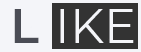
<style>
.page{position:relative;width:141px;height:52px;background:#f4f5f9}
.page>*{position:absolute;margin:0}
.t1{font:48px "Montserrat-SemiBold";color:#4a4c55}
.t2{font:48px "Montserrat-Regular";color:#f4f5f9}
</style>
<div class="page">
<p class="t1" style="left:14px;top:9px;width:25px;height:34px">L</p>
<p class="t2" style="left:60px;top:9px;width:74px;height:34px">IKE</p>
</div>
